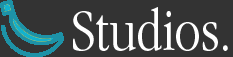
<style>
.page{position:relative;width:233px;height:57px;background:#333333}
.page>*{position:absolute;margin:0}
.t1{font:60.5px "ITCGaramondStd-LtNarrow";color:#ffffff}
</style>
<div class="page">
<p class="t1" style="left:73px;top:7px;width:155px;height:44px">Studios.</p>
</div>
